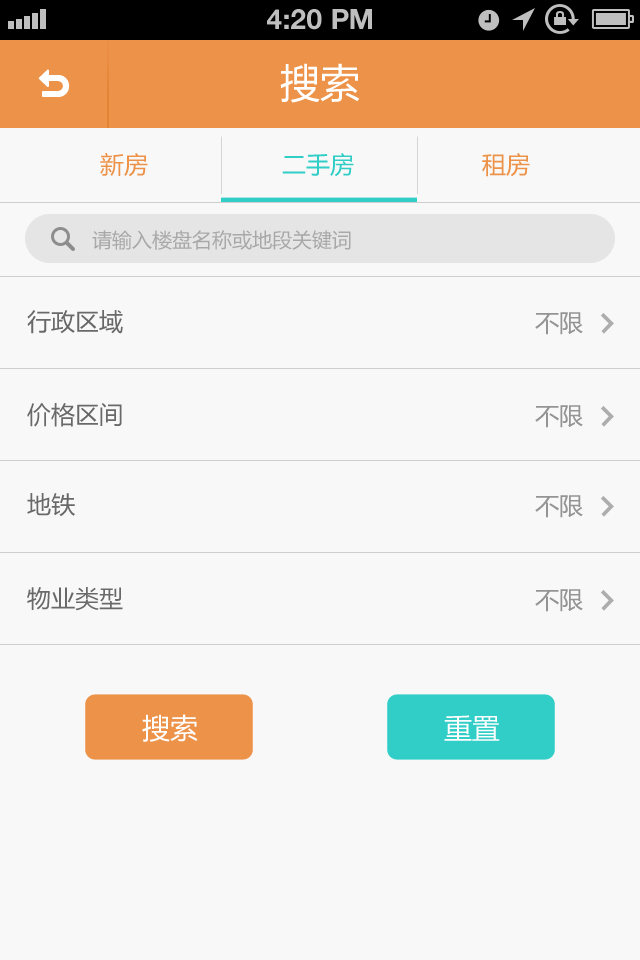
<style>
.page{position:relative;width:640px;height:960px;background:#f8f8f8}
.page>*{position:absolute;margin:0}
.t1{font:28px "HelveticaNeue-Bold";color:#bfbfbf;text-transform:uppercase}
.t2{font:40px "MicrosoftYaHei";color:#ffffff}
.t3{font:24px "MicrosoftYaHei";color:#ed9249}
.t4{font:24px "MicrosoftYaHei";color:#31cec8}
.t5{font:20px "MicrosoftYaHei";color:#a8a8a8}
.t6{font:24px "MicrosoftYaHei";color:#696969}
.t7{font:24px "MicrosoftYaHei";color:#949494}
.t8{font:28px "MicrosoftYaHei";color:#fffefe}
</style>
<div class="page">
<p class="t1" style="left:267px;top:9px;width:105px;height:21px">4:20 PM</p>
<p class="t2" style="left:280px;top:63px;width:80px;height:40px">搜索</p>
<p class="t3" style="left:100px;top:152px;width:48px;height:25px">新房</p>
<p class="t4" style="left:282px;top:153px;width:72px;height:24px">二手房</p>
<p class="t3" style="left:482px;top:153px;width:48px;height:24px">租房</p>
<p class="t5" style="left:92px;top:230px;width:259px;height:20px">请输入楼盘名称或地段关键词</p>
<p class="t6" style="left:27px;top:310px;width:96px;height:24px">行政区域</p>
<p class="t7" style="left:535px;top:312px;width:48px;height:23px">不限</p>
<p class="t6" style="left:27px;top:403px;width:95px;height:24px">价格区间</p>
<p class="t7" style="left:535px;top:405px;width:48px;height:23px">不限</p>
<p class="t6" style="left:27px;top:493px;width:48px;height:24px">地铁</p>
<p class="t7" style="left:535px;top:495px;width:48px;height:23px">不限</p>
<p class="t6" style="left:27px;top:587px;width:96px;height:24px">物业类型</p>
<p class="t7" style="left:535px;top:589px;width:48px;height:23px">不限</p>
<p class="t8" style="left:142px;top:714px;width:56px;height:28px">搜索</p>
<p class="t8" style="left:444px;top:715px;width:56px;height:26px">重置</p>
</div>
